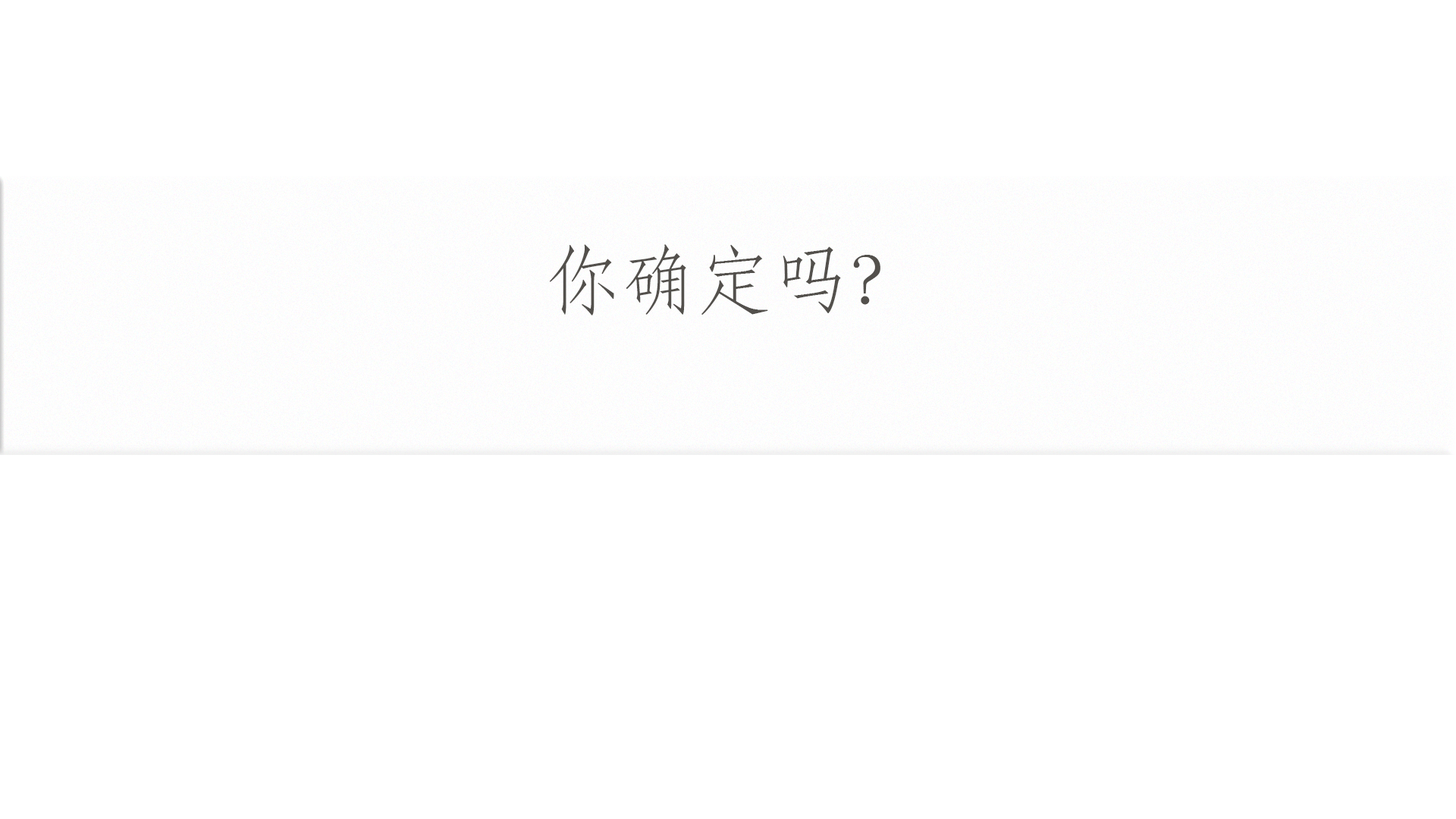
<style>
.page{position:relative;width:1456px;height:819px;background:#ffffff}
.page>*{position:absolute;margin:0}
.t1{font:75.8px "STFangsong";color:#53504c}
</style>
<div class="page">
<p class="t1" style="left:549px;top:244px;width:331px;height:71px">你确定吗？</p>
</div>
